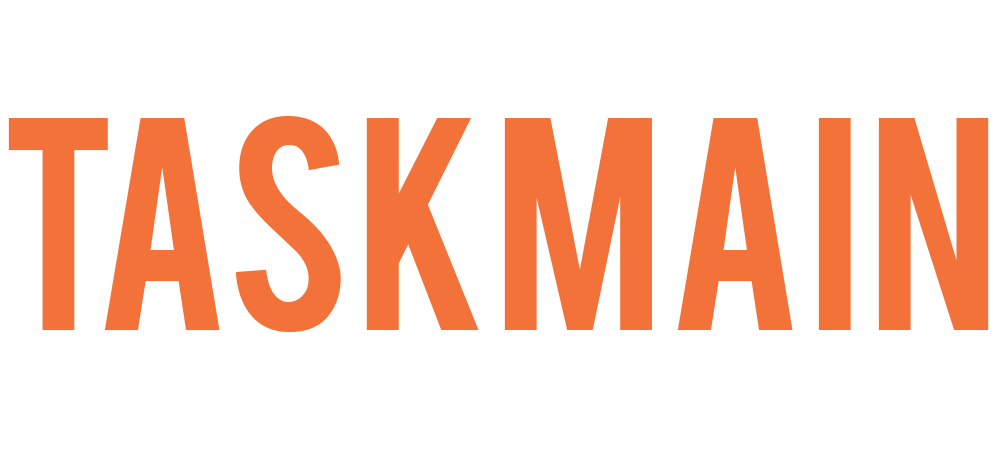
<style>
.page{position:relative;width:1000px;height:450px;background:#ffffff}
.page>*{position:absolute;margin:0}
.t1{font:236px "Bebas";color:#f27239}
</style>
<div class="page">
<p class="t1" style="left:8px;top:116px;width:981px;height:216px">TaskMain</p>
</div>
